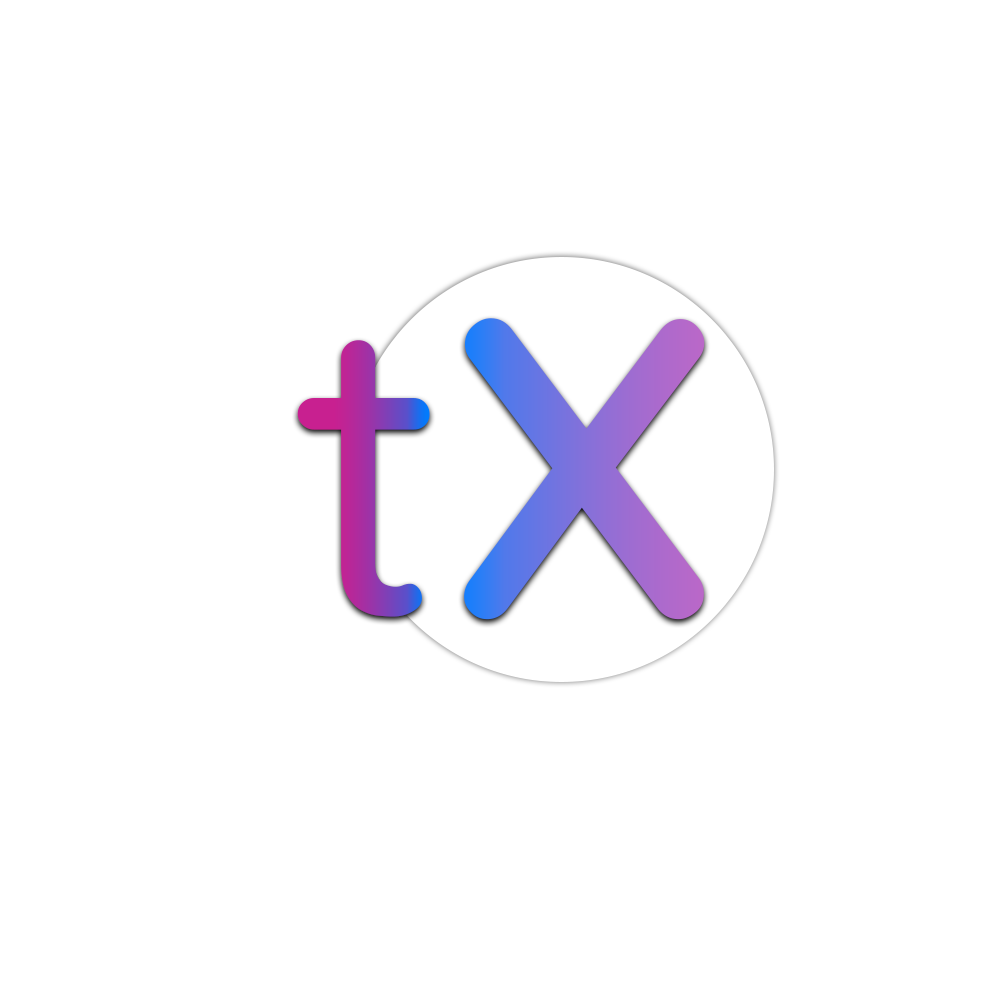
<style>
.page{position:relative;width:1000px;height:1000px;background:#ffffff}
.page>*{position:absolute;margin:0}
.t1{font:425px "Quicksand-Medium"}
.t2{font:425px "Quicksand-Bold"}
</style>
<div class="page">
<p class="t1" style="left:297px;top:318px;width:408px;height:302px">t<span class="t2">X</span></p>
</div>
